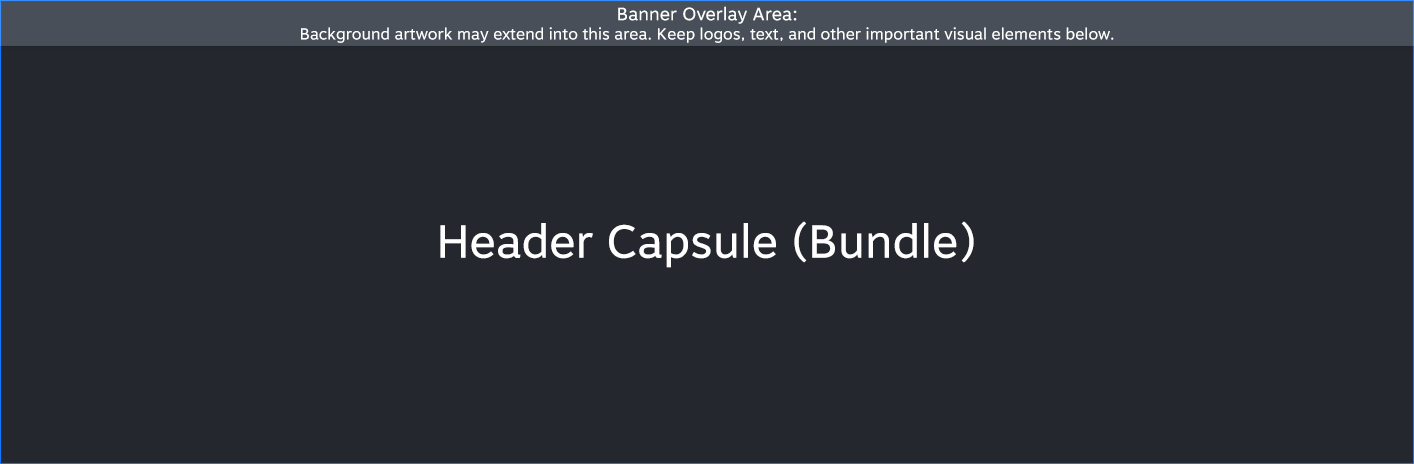
<style>
.page{position:relative;width:1414px;height:464px;background:#24282e}
.page>*{position:absolute;margin:0}
.t1{font:16px "MotivaSans-Regular";color:#ffffff}
.t2{font:18px "MotivaSans-Regular";color:#ffffff}
.t3{font:46.3px "MotivaSans-Regular";color:#ffffff}
</style>
<div class="page">
<p class="t1" style="left:301px;top:6px;width:813px;height:37px;text-align:center"><span class="t2">Banner Overlay Area:<br></span>Background artwork may extend into this area. Keep logos, text, and other important visual elements below.</p>
<p class="t3" style="left:440px;top:221px;width:534px;height:47px">Header Capsule (Bundle)</p>
</div>
